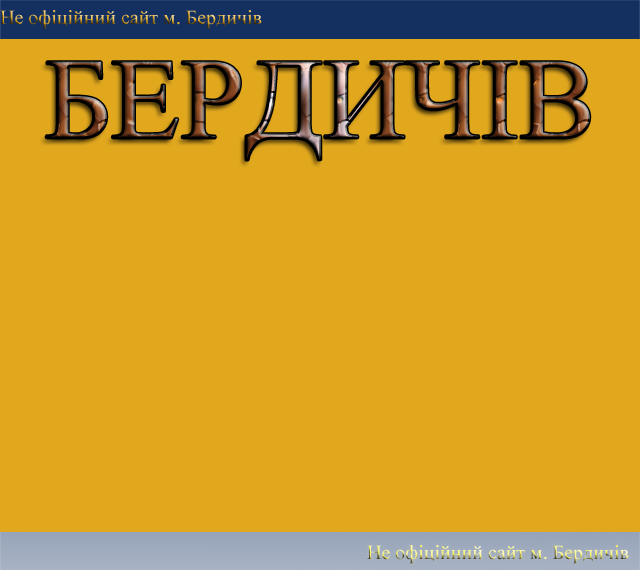
<style>
.page{position:relative;width:640px;height:570px;background:#e1a81e}
.page>*{position:absolute;margin:0}
.t1{font:20px "TimesNewRomanPSMT"}
.t2{font:115px "TimesNewRomanPSMT"}
</style>
<div class="page">
<p class="t1" style="left:0px;top:10px;width:262px;height:19px">Не офіційний сайт м. Бердичів</p>
<p class="t2" style="left:46px;top:61px;width:544px;height:99px">БЕРДИЧІВ</p>
<p class="t1" style="left:367px;top:545px;width:262px;height:19px">Не офіційний сайт м. Бердичів</p>
</div>
